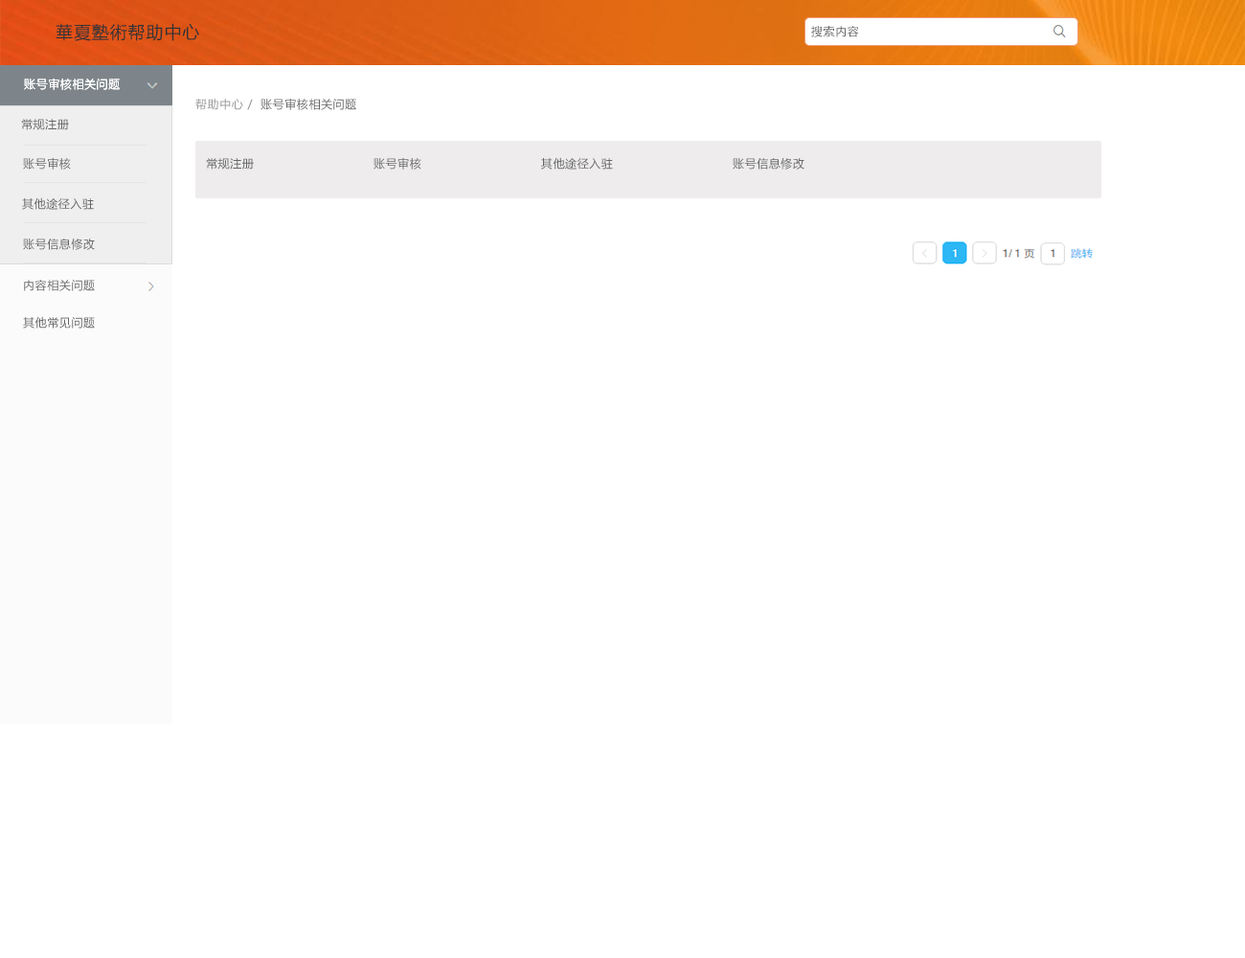
<style>
.page{position:relative;width:1245px;height:958px;background:#ffffff}
.page>*{position:absolute;margin:0}
.t1{font:17.2px "MicrosoftYaHei";letter-spacing:0.05em;color:#333333}
.t2{font:11.5px "MicrosoftYaHei";letter-spacing:0.05em;color:#666666}
.t3{font:11.5px "MicrosoftYaHei";letter-spacing:0.05em;color:#ffffff}
.t4{font:11.5px "MicrosoftYaHei";letter-spacing:0.05em;color:#999999}
</style>
<div class="page">
<p class="t1" style="left:56px;top:23px;width:143px;height:18px">華夏塾術帮助中心</p>
<p class="t2" style="left:811px;top:26px;width:48px;height:11px">搜索内容</p>
<p class="t3" style="left:24px;top:78px;width:96px;height:12px">账号审核相关问题</p>
<p class="t3" style="left:24px;top:78px;width:96px;height:12px">账号审核相关问题</p>
<p class="t4" style="left:195px;top:99px;width:58px;height:11px">帮助中心 /</p>
<p class="t2" style="left:261px;top:98px;width:95px;height:12px">账号审核相关问题</p>
<p class="t2" style="left:21px;top:119px;width:48px;height:11px">常规注册</p>
<p class="t2" style="left:23px;top:157px;width:48px;height:13px">账号审核</p>
<p class="t2" style="left:206px;top:157px;width:598px;height:13px">常规注册                              账号审核                              其他途径入驻                              账号信息修改</p>
<p class="t2" style="left:22px;top:197px;width:72px;height:13px">其他途径入驻</p>
<p class="t2" style="left:23px;top:238px;width:72px;height:12px">账号信息修改</p>
<p class="t2" style="left:24px;top:280px;width:71px;height:11px">内容相关问题</p>
<p class="t2" style="left:23px;top:316px;width:72px;height:13px">其他常见问题</p>
</div>
